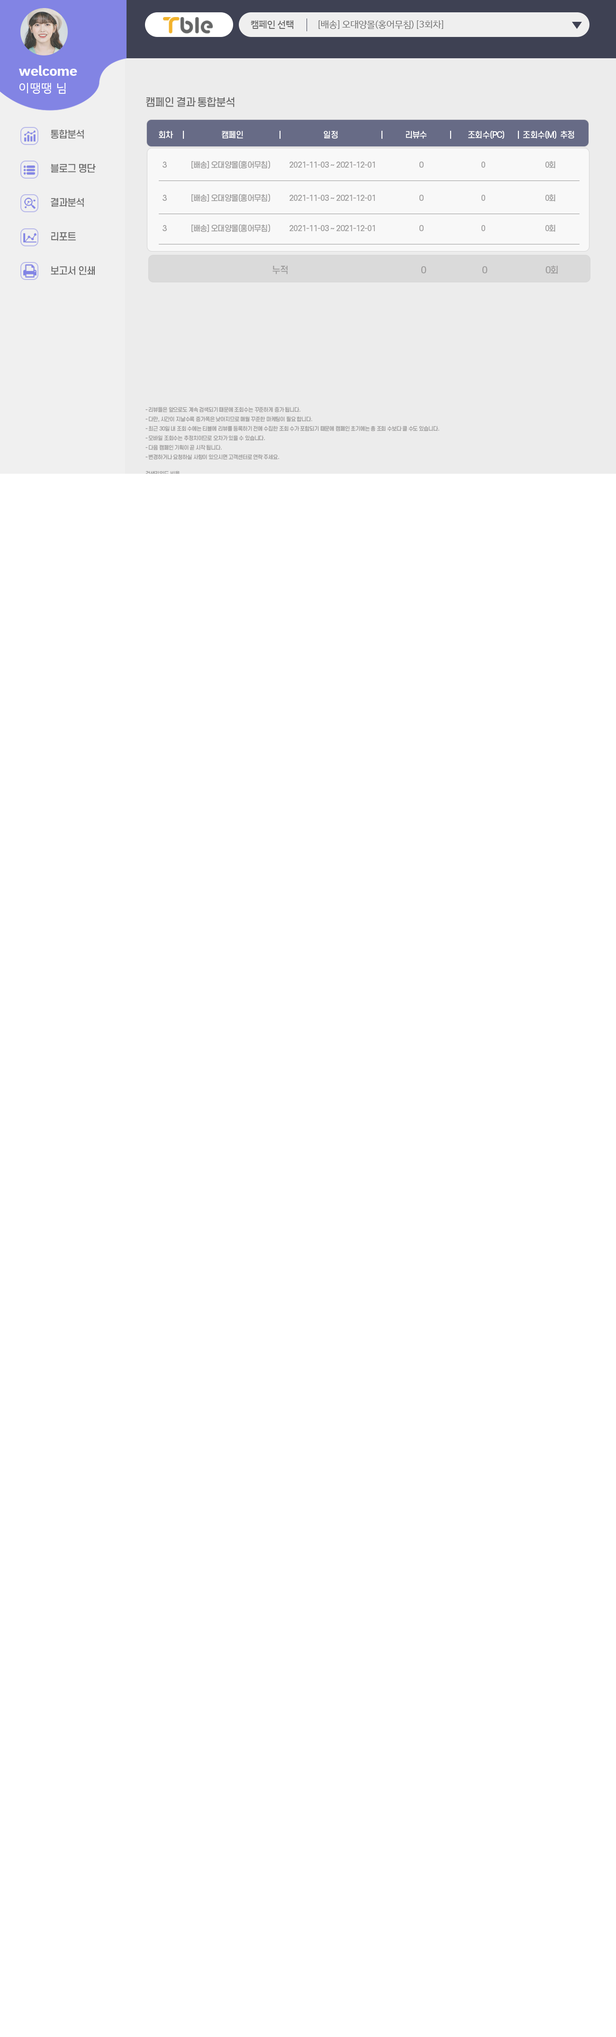
<style>
.page{position:relative;width:616px;height:2037px;background:#ffffff}
.page>*{position:absolute;margin:0}
.t1{font:9.5px "IBMPlexSansKR-Medium";letter-spacing:-0.02em;color:#6a6a6a}
.t2{font:9.5px "IBMPlexSansKR";letter-spacing:-0.02em;color:#6a6a6a}
.t3{font:14.2px "IBMPlexSansKR-Bold";letter-spacing:-0.02em;color:#ffffff}
.t4{font:11.8px "IBMPlexSansKR";letter-spacing:0.06em;color:#ffffff}
.t5{font:10.4px "S-CoreDream-5Medium";letter-spacing:-0.06em;color:#6a6a6a}
.t6{font:9.5px/11.4px "S-CoreDream-5Medium";letter-spacing:-0.06em;color:#6a6a6a}
.t7{font:8.1px "S-CoreDream-5Medium";letter-spacing:-0.06em;color:#ffffff}
.t8{font:7.6px "S-CoreDream-5Medium";letter-spacing:-0.06em;color:#9c9b9b}
.t9{font:9px "S-CoreDream-5Medium";letter-spacing:-0.06em;color:#9c9b9b}
.t10{font:5.2px/9.5px "S-CoreDream-5Medium";letter-spacing:-0.06em;color:#9c9b9b}
</style>
<div class="page">
<p class="t1" style="left:251px;top:20px;width:42px;height:9px">캠페인 선택</p>
<p class="t2" style="left:318px;top:20px;width:125px;height:9px">[배송] 오대양몰(홍어무침) [3회차]</p>
<p class="t3" style="left:19px;top:65px;width:58px;height:11px">welcome</p>
<p class="t4" style="left:19px;top:83px;width:47px;height:11px">이땡땡 님</p>
<p class="t5" style="left:146px;top:97px;width:88px;height:10px">캠페인 결과 통합분석</p>
<p class="t6" style="left:51px;top:129px;width:45px;height:146px">통합분석<br><br><br>블로그 명단<br><br><br>결과분석<br><br><br>리포트<br><br><br>보고서 인쇄</p>
<p class="t7" style="left:159px;top:130px;width:415px;height:9px">회차     |                    캠페인                   |                       일정                       |            리뷰수            |         조회수(PC)       |  조회수(M)  추정</p>
<p class="t8" style="left:162px;top:161px;width:393px;height:8px">3              [배송] 오대양몰(홍어무침)           2021-11-03 ~ 2021-12-01                     0                                 0                                  0회</p>
<p class="t8" style="left:162px;top:194px;width:393px;height:8px">3              [배송] 오대양몰(홍어무침)           2021-11-03 ~ 2021-12-01                     0                                 0                                  0회</p>
<p class="t8" style="left:162px;top:224px;width:393px;height:8px">3              [배송] 오대양몰(홍어무침)           2021-11-03 ~ 2021-12-01                     0                                 0                                  0회</p>
<p class="t9" style="left:272px;top:266px;width:16px;height:8px">누적</p>
<p class="t9" style="left:421px;top:265px;width:137px;height:9px">0                           0                            0회</p>
<p class="t10" style="left:145px;top:407px;width:294px;height:52px">- 리뷰들은 앞으로도 계속 검색되기 때문에 조회수는 꾸준하게 증가 됩니다.<br>- 다만, 시간이 지날수록 증가폭은 낮아지므로 매월 꾸준한 마케팅이 필요 합니다.<br>- 최근 30일 내 조회 수에는 티블에 리뷰를 등록하기 전에 수집한 조회 수가 포함되기 때문에 캠페인 초기에는 총 조회 수보다 클 수도 있습니다.<br>- 모바일 조회수는 추정치이므로 오차가 있을 수 있습니다.<br>- 다음 캠페인 기획이 곧 시작 됩니다.<br>- 변경하거나 요청하실 사항이 있으시면 고객센터로 연락 주세요.</p>
</div>
